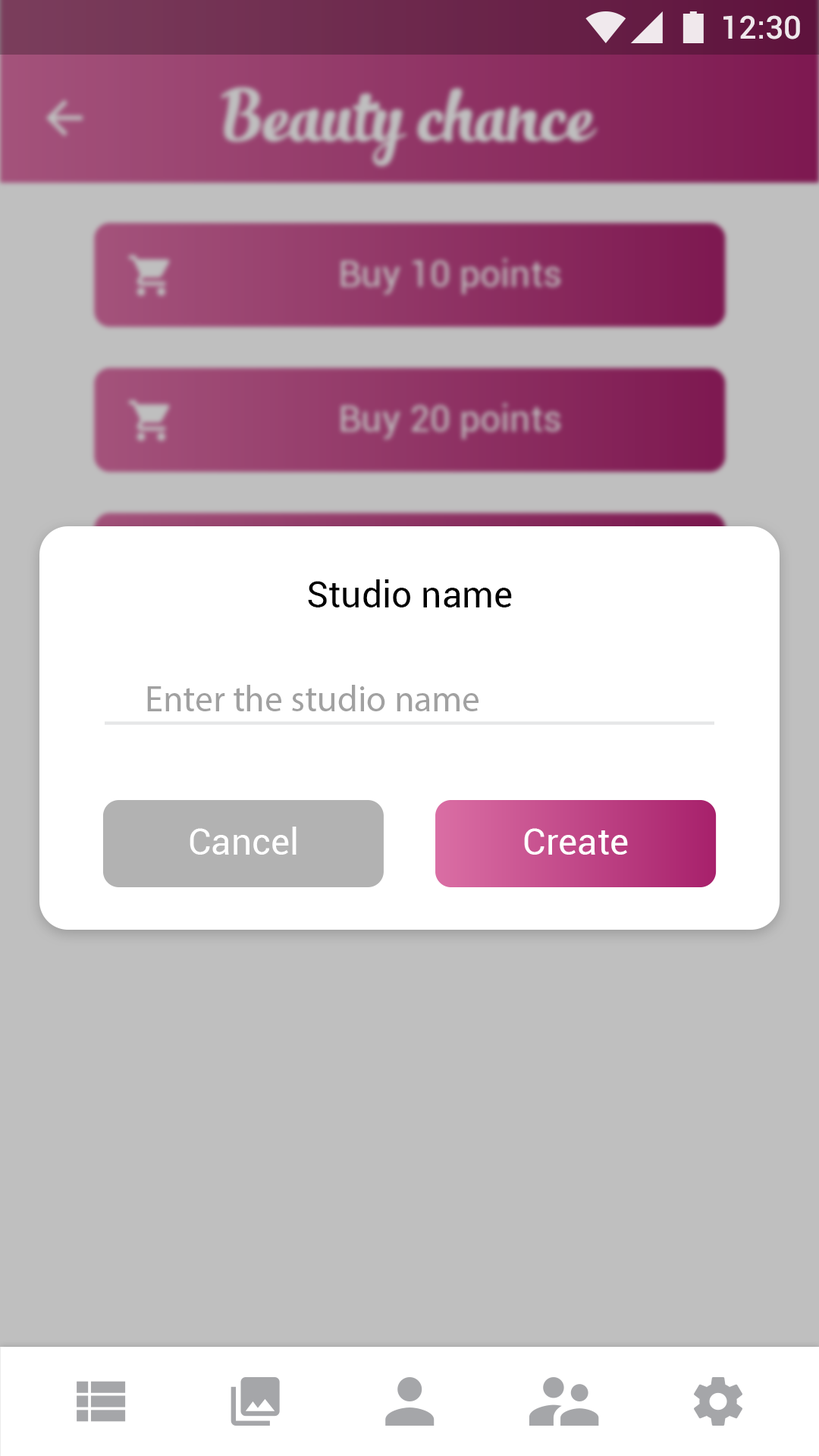
<style>
.page{position:relative;width:819px;height:1456px;background:#bfbfbf}
.page>*{position:absolute;margin:0}
.t1{font:31.8px "Roboto-Medium";color:#ffffff}
.t2{font:36.4px "Roboto-Regular";color:#000000}
.t3{font:36.4px "MyriadPro-Regular";color:#a1a1a1}
.t4{font:36.4px "Roboto-Regular";color:#ffffff}
</style>
<div class="page">
<p class="t1" style="left:723px;top:15px;width:77px;height:24px">12:30</p>
<p class="t2" style="left:308px;top:579px;width:204px;height:28px">Studio name</p>
<p class="t3" style="left:147px;top:685px;width:332px;height:26px">Enter the studio name</p>
<p class="t4" style="left:190px;top:827px;width:107px;height:28px">Cancel</p>
<p class="t4" style="left:524px;top:828px;width:104px;height:27px">Create</p>
</div>
